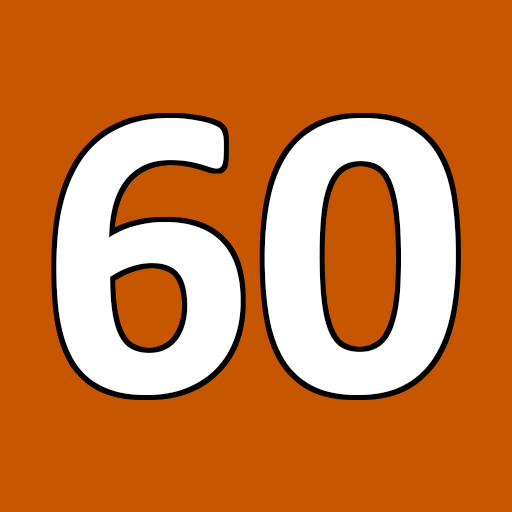
<style>
.page{position:relative;width:512px;height:512px;background:#c65600}
.page>*{position:absolute;margin:0}
.t1{font:423.3px "Calibri-Bold";color:#ffffff}
</style>
<div class="page">
<p class="t1" style="left:56px;top:118px;width:400px;height:277px">60</p>
</div>
